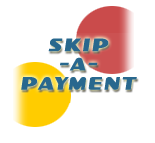
<style>
.page{position:relative;width:155px;height:143px;background:#ffffff}
.page>*{position:absolute;margin:0}
.t1{font:19px/19.2px "SFIntellivisedExtended";letter-spacing:0.15em;color:#29688e;font-weight:bold;font-style:italic;scale:0.8 1}
</style>
<div class="page">
<p class="t1" style="left:21px;top:38px;width:116px;height:52px;text-align:center">SKIP<br>-A-<br>PAYMENT</p>
</div>
